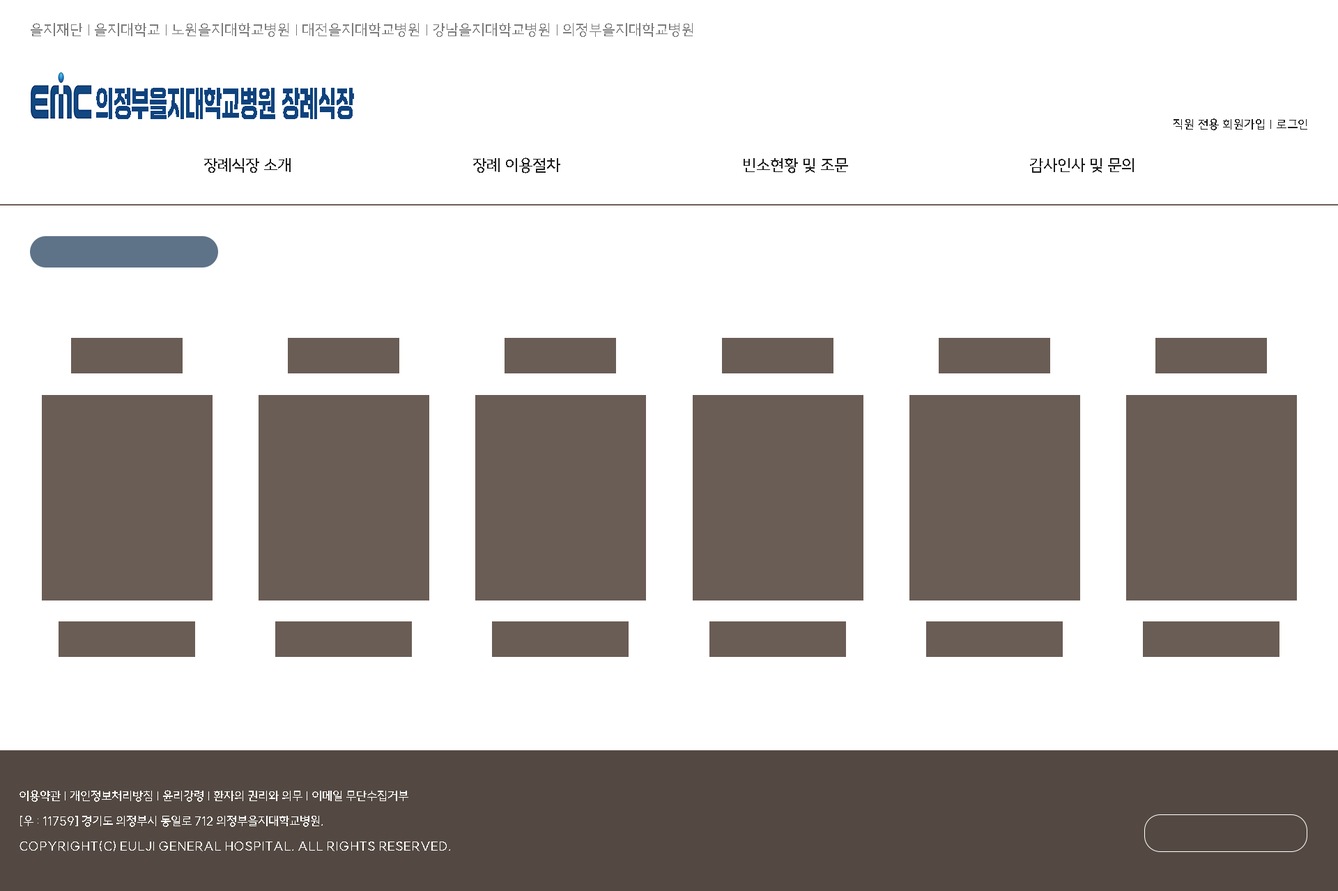
<style>
.page{position:relative;width:1338px;height:891px;background:#ffffff}
.page>*{position:absolute;margin:0}
.t1{font:15.3px "SUITE-Regular";color:#7d7d7d}
.t2{font:33.4px "JalnanGothicTTF";color:#0f437e;scale:0.54 1}
.t3{font:12.5px "SUITE-Medium";color:#1e1e1e}
.t4{font:16.7px "SUITE-Medium";color:#1e1e1e}
.t5{font:12.5px/25.1px "SUITE-Medium";color:#ffffff}
</style>
<div class="page">
<p class="t1" style="left:31px;top:23px;width:662px;height:14px">을지재단 | 을지대학교 | 노원을지대학교병원 | 대전을지대학교병원 | 강남을지대학교병원 | 의정부을지대학교병원</p>
<p class="t2" style="left:49px;top:88px;width:305px;height:31px">EMC 의정부을지대학교병원 장례식장</p>
<p class="t3" style="left:1173px;top:118px;width:134px;height:12px">직원 전용 회원가입 | 로그인</p>
<p class="t4" style="left:204px;top:158px;width:87px;height:15px">장례식장 소개</p>
<p class="t4" style="left:473px;top:157px;width:87px;height:17px">장례 이용절차</p>
<p class="t4" style="left:744px;top:158px;width:104px;height:16px">빈소현황 및 조문</p>
<p class="t4" style="left:1030px;top:158px;width:104px;height:15px">감사인사 및 문의</p>
<p class="t5" style="left:20px;top:790px;width:430px;height:62px">이용약관 | 개인정보처리방침 | 윤리강령 | 환자의 권리와 의무 | 이메일 무단수집거부<br>[우 : 11759] 경기도 의정부시 동일로 712 의정부을지대학교병원.<br>COPYRIGHT(C) EULJI GENERAL HOSPITAL. ALL RIGHTS RESERVED.</p>
</div>
